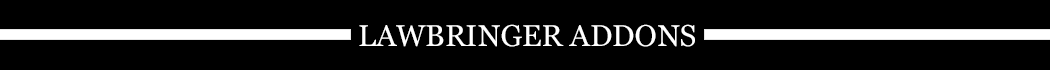
<style>
.page{position:relative;width:1050px;height:70px;background:#000000}
.page>*{position:absolute;margin:0}
.t1{font:29.9px "Georgia";color:#ffffff}
</style>
<div class="page">
<p class="t1" style="left:359px;top:24px;width:336px;height:23px">LAWBRINGER ADDONS</p>
</div>
